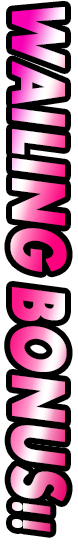
<style>
.page{position:relative;width:78px;height:549px;background:#000000}
.page>*{position:absolute;margin:0}
.t1{font:78px "Aharoni-Bold";font-weight:bold;font-style:italic;scale:0.75 1}
</style>
<div class="page">
<p class="t1" style="left:10px;top:7px;width:57px;height:265px;rotate:90deg">WAILING</p>
<p class="t1" style="left:10px;top:287px;width:57px;height:245px;rotate:90deg">BONUS!!</p>
</div>
